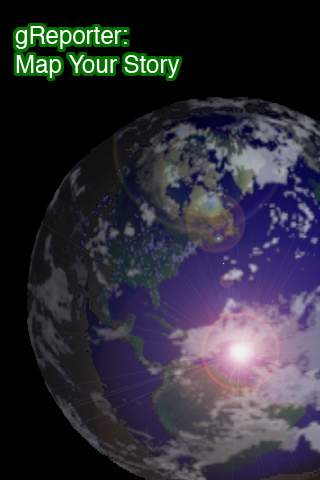
<style>
.page{position:relative;width:320px;height:480px;background:#000000}
.page>*{position:absolute;margin:0}
.t1{font:24px "Helvetica";color:#ffffff}
</style>
<div class="page">
<p class="t1" style="left:15px;top:26px;width:165px;height:52px">gReporter:<br>Map Your Story</p>
</div>
